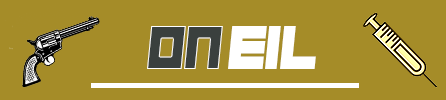
<style>
.page{position:relative;width:446px;height:100px;background:#a58c28}
.page>*{position:absolute;margin:0}
.t1{font:62.5px "Hindsight2020";color:#3a403e;scale:0.94 1}
.t2{font:62.5px "Hindsight2020";color:#ffffff;scale:0.94 1}
</style>
<div class="page">
<p class="t1" style="left:147px;top:26px;width:76px;height:43px">on</p>
<p class="t2" style="left:228px;top:26px;width:88px;height:43px">eil</p>
</div>
